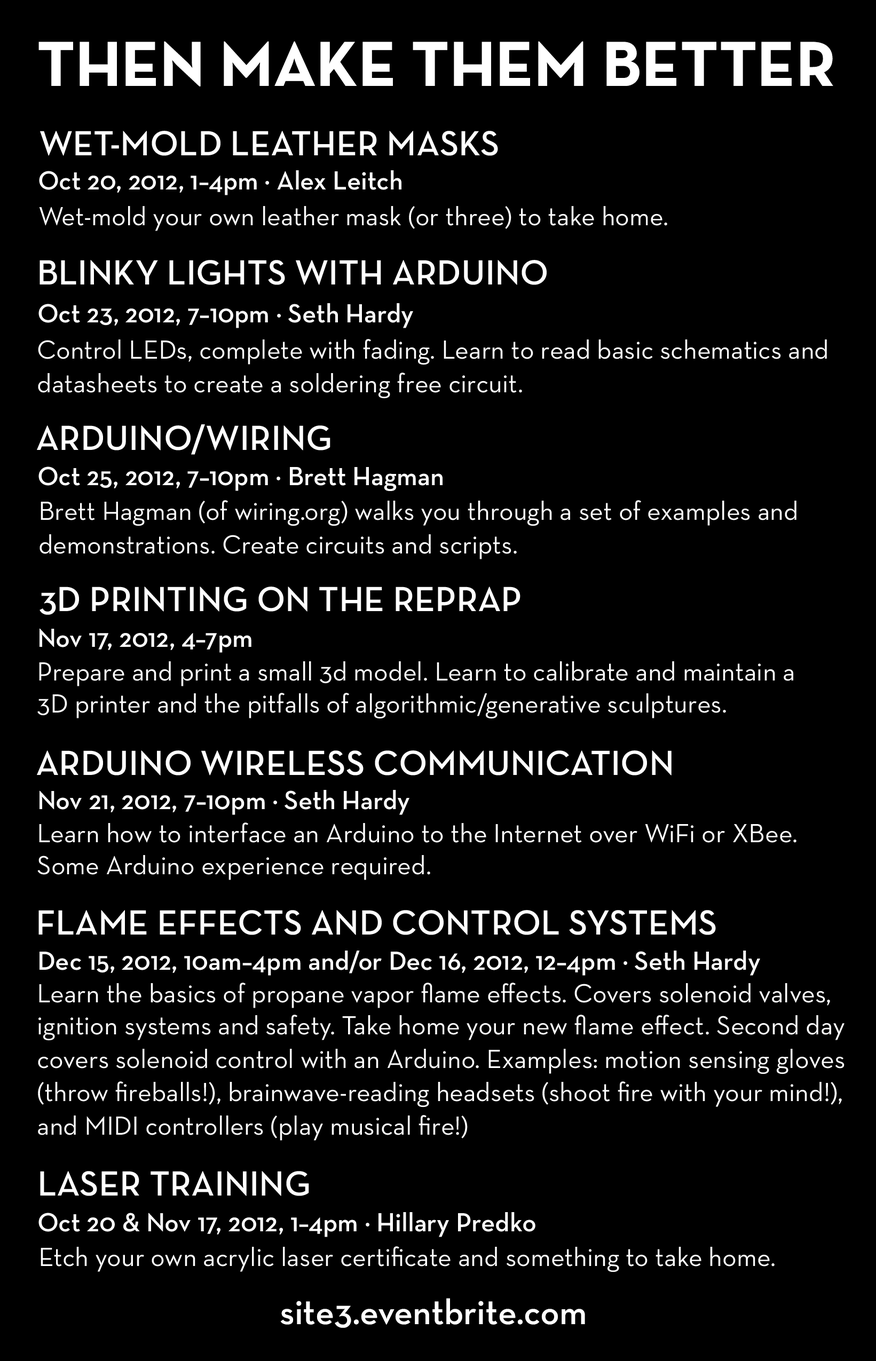
<style>
.page{position:relative;width:876px;height:1361px;background:#000000}
.page>*{position:absolute;margin:0}
.t1{font:64.6px "NeutraText-Bold";color:#ffffff;text-transform:uppercase}
.t2{font:35.6px "NeutraText-Demi";color:#ffffff;text-transform:uppercase}
.t3{font:26.7px "NeutraText-Demi";color:#ffffff}
.t4{font:26.7px "NeutraText-Book";color:#ffffff}
.t5{font:26.7px/33.4px "NeutraText-Book";color:#ffffff}
.t6{font:35.6px "NeutraText-Demi";color:#ffffff}
</style>
<div class="page">
<p class="t1" style="left:38px;top:41px;width:795px;height:45px">Then Make THem Better</p>
<p class="t2" style="left:40px;top:131px;width:458px;height:25px">Wet-Mold Leather Masks</p>
<p class="t3" style="left:39px;top:170px;width:362px;height:25px">Oct 20, 2012, 1–4pm · Alex Leitch</p>
<p class="t4" style="left:39px;top:206px;width:628px;height:25px">Wet-mold your own leather mask (or three) to take home.</p>
<p class="t2" style="left:40px;top:260px;width:507px;height:25px">Blinky Lights with Arduino</p>
<p class="t3" style="left:38px;top:303px;width:375px;height:25px">Oct 23, 2012, 7–10pm · Seth Hardy</p>
<p class="t5" style="left:38px;top:339px;width:789px;height:60px">Control LEDs, complete with fading. Learn to read basic schematics and datasheets to create a soldering free circuit.</p>
<p class="t2" style="left:37px;top:424px;width:293px;height:31px">Arduino/Wiring</p>
<p class="t3" style="left:38px;top:467px;width:405px;height:24px">Oct 25, 2012, 7–10pm · Brett Hagman</p>
<p class="t5" style="left:40px;top:500px;width:756px;height:59px">Brett Hagman (of wiring.org) walks you through a set of examples and demonstrations. Create circuits and scripts.</p>
<p class="t2" style="left:40px;top:587px;width:480px;height:28px">3D Printing on the RepRap</p>
<p class="t3" style="left:40px;top:628px;width:211px;height:25px">Nov 17, 2012, 4–7pm</p>
<p class="t4" style="left:37px;top:661px;width:756px;height:58px">Prepare and print a small 3d model. Learn to calibrate and maintain a <br>3D printer and the pitfalls of algorithmic/generative sculptures.</p>
<p class="t2" style="left:37px;top:751px;width:635px;height:25px">Arduino Wireless Communication</p>
<p class="t3" style="left:40px;top:790px;width:369px;height:25px">Nov 21, 2012, 7–10pm · Seth Hardy</p>
<p class="t4" style="left:37px;top:823px;width:759px;height:57px">Learn how to interface an Arduino to the Internet over WiFi or XBee. Some Arduino experience required.</p>
<p class="t2" style="left:38px;top:910px;width:678px;height:25px">Flame Effects and Control Systems</p>
<p class="t3" style="left:40px;top:951px;width:720px;height:25px">Dec 15, 2012, 10am–4pm and/or Dec 16, 2012, 12–4pm · Seth Hardy</p>
<p class="t4" style="left:38px;top:983px;width:806px;height:158px">Learn the basics of propane vapor flame effects. Covers solenoid valves, ignition systems and safety. Take home your new flame effect. Second day covers solenoid control with an Arduino. <span class="t5">Examples: motion sensing gloves (throw fireballs!), brainwave-reading headsets (shoot fire with your mind!), and MIDI controllers (play musical fire!)</span></p>
<p class="t2" style="left:40px;top:1171px;width:269px;height:25px">Laser Training</p>
<p class="t3" style="left:38px;top:1212px;width:497px;height:25px">Oct 20 &amp; Nov 17, 2012, 1–4pm · Hillary Predko</p>
<p class="t4" style="left:41px;top:1246px;width:734px;height:27px">Etch your own acrylic laser certificate and something to take home.</p>
<p class="t6" style="left:280px;top:1298px;width:305px;height:30px">site3.eventbrite.com</p>
</div>
